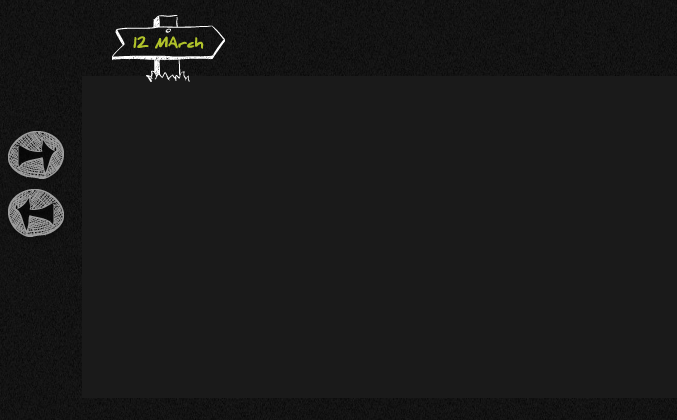
<style>
.page{position:relative;width:677px;height:420px;background:#1a1a1a}
.page>*{position:absolute;margin:0}
.t1{font:12.1px "DanielBlack";color:#b0c22a;font-weight:bold}
</style>
<div class="page">
<p class="t1" style="left:133px;top:36px;width:71px;height:13px">12 MArch</p>
</div>
